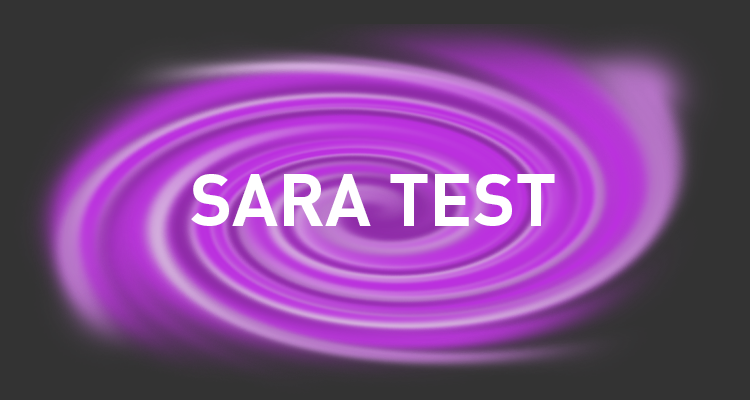
<style>
.page{position:relative;width:750px;height:400px;background:#333333}
.page>*{position:absolute;margin:0}
.t1{font:72px "DINPro-Bold";color:#ffffff}
</style>
<div class="page">
<p class="t1" style="left:191px;top:174px;width:364px;height:52px">SARA TEST</p>
</div>
